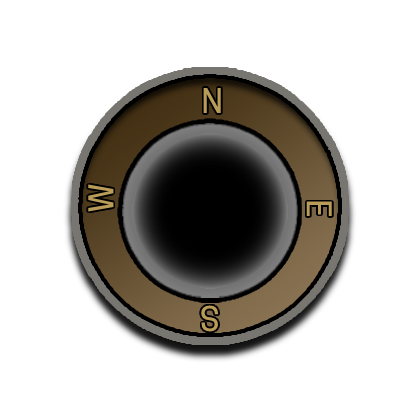
<style>
.page{position:relative;width:420px;height:420px;background:#ffffff}
.page>*{position:absolute;margin:0}
.t1{font:32.1px "TanoheSans-Medium";color:#b89c58}
</style>
<div class="page">
<p class="t1" style="left:203px;top:88px;width:18px;height:25px">N</p>
<p class="t1" style="left:88px;top:184px;width:26px;height:28px;rotate:-90deg">W</p>
<p class="t1" style="left:306px;top:201px;width:26px;height:16px;rotate:90deg">E</p>
<p class="t1" style="left:201px;top:305px;width:18px;height:27px;rotate:180deg">S</p>
</div>
